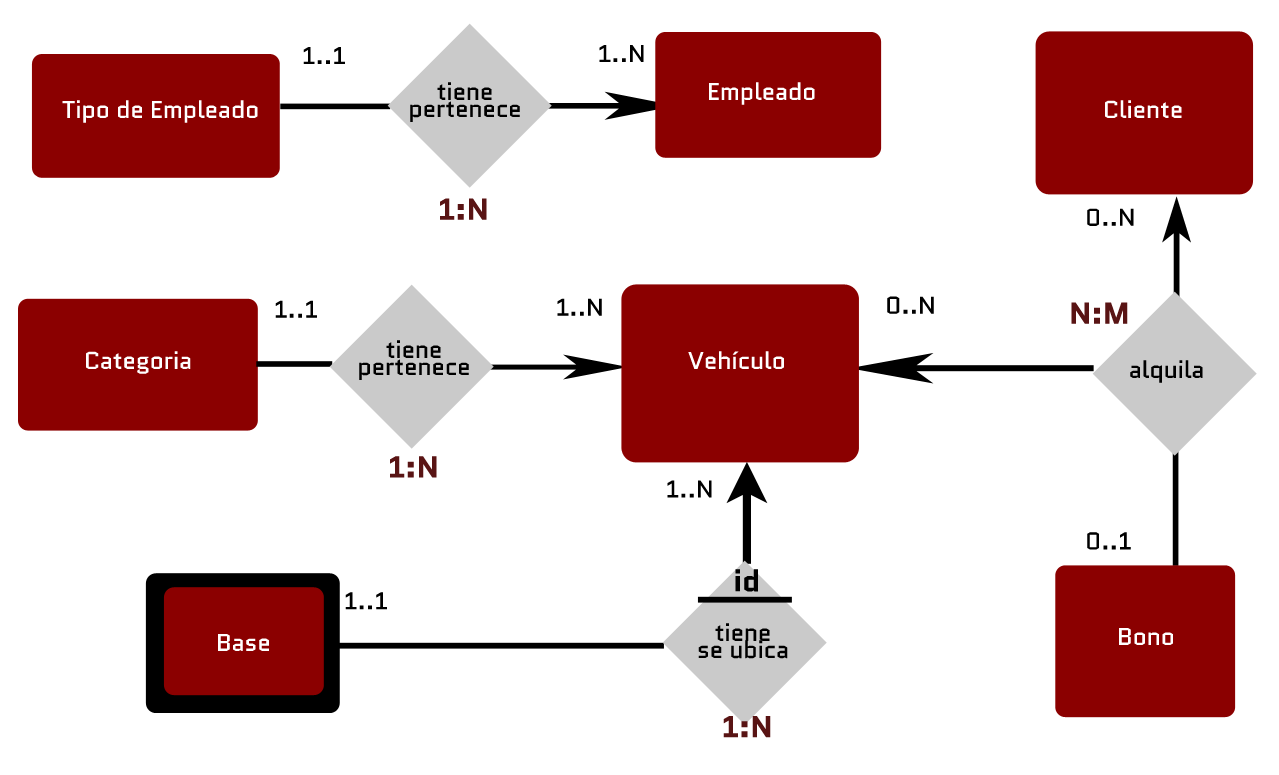
<style>
.page{position:relative;width:1279px;height:775px;background:#ffffff}
.page>*{position:absolute;margin:0}
.t1{font:24px "Quantico-Regular";color:#000000}
.t2{font:24px/17.1px "Quantico-Regular";color:#000000}
.t3{font:24px "Quantico-Regular";color:#ffffff}
.t4{font:30px "Quantico-Bold";color:#591414}
.t5{font:30px "Quantico-Bold";color:#000000}
</style>
<div class="page">
<p class="t1" style="left:303px;top:47px;width:42px;height:17px">1..1</p>
<p class="t1" style="left:599px;top:45px;width:45px;height:17px">1..N</p>
<p class="t2" style="left:410px;top:82px;width:110px;height:40px;text-align:center">tiene<br>pertenece</p>
<p class="t3" style="left:709px;top:82px;width:106px;height:23px">Empleado</p>
<p class="t3" style="left:62px;top:100px;width:196px;height:23px">Tipo de Empleado</p>
<p class="t3" style="left:1105px;top:100px;width:77px;height:18px">Cliente</p>
<p class="t4" style="left:440px;top:198px;width:47px;height:22px">1:N</p>
<p class="t1" style="left:1087px;top:208px;width:47px;height:18px">0..N</p>
<p class="t1" style="left:275px;top:300px;width:42px;height:18px">1..1</p>
<p class="t1" style="left:557px;top:298px;width:45px;height:18px">1..N</p>
<p class="t1" style="left:887px;top:296px;width:47px;height:18px">0..N</p>
<p class="t4" style="left:1071px;top:302px;width:57px;height:22px">N:M</p>
<p class="t2" style="left:359px;top:340px;width:110px;height:40px;text-align:center">tiene<br>pertenece</p>
<p class="t3" style="left:86px;top:351px;width:105px;height:23px">Categoria</p>
<p class="t3" style="left:688px;top:351px;width:96px;height:18px">Vehículo</p>
<p class="t1" style="left:1130px;top:360px;width:73px;height:23px">alquila</p>
<p class="t4" style="left:390px;top:456px;width:47px;height:22px">1:N</p>
<p class="t1" style="left:667px;top:480px;width:45px;height:18px">1..N</p>
<p class="t1" style="left:1087px;top:532px;width:44px;height:18px">0..1</p>
<p class="t5" style="left:735px;top:569px;width:23px;height:23px">id</p>
<p class="t1" style="left:345px;top:592px;width:42px;height:18px">1..1</p>
<p class="t2" style="left:698px;top:623px;width:90px;height:36px;text-align:center">tiene<br>se ubica</p>
<p class="t3" style="left:1119px;top:628px;width:54px;height:17px">Bono</p>
<p class="t3" style="left:218px;top:634px;width:51px;height:17px">Base</p>
<p class="t4" style="left:723px;top:716px;width:48px;height:22px">1:N</p>
</div>
